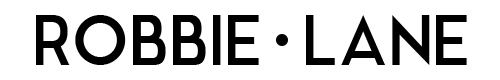
<style>
.page{position:relative;width:500px;height:80px;background:#ffffff}
.page>*{position:absolute;margin:0}
.t1{font:67px "ModernSans";color:#000000}
</style>
<div class="page">
<p class="t1" style="left:36px;top:15px;width:431px;height:50px">ROBBIE LANE</p>
</div>
